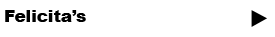
<style>
.page{position:relative;width:275px;height:37px;background:#ffffff}
.page>*{position:absolute;margin:0}
.t1{font:16.7px "Arial-Black";color:#000000}
</style>
<div class="page">
<p class="t1" style="left:5px;top:10px;width:81px;height:12px">Felicita’s</p>
</div>
